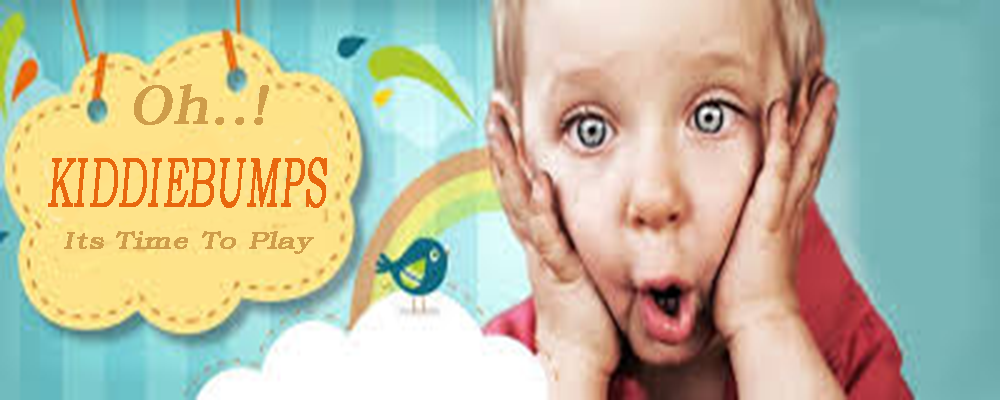
<style>
.page{position:relative;width:1000px;height:400px}
.page>*{position:absolute;margin:0}
.t1{font:54.4px "BookmanOldStyle";color:#ce9d4a;font-weight:bold;font-style:italic}
.t2{font:70.8px "BookmanOldStyle";color:#e8670e;font-weight:bold;font-style:italic;scale:0.5 1}
.t3{font:24.2px "BookmanOldStyle";color:#ce9d4a;font-weight:bold;font-style:italic;scale:1.22 1}
</style>
<div class="page">
<p class="t1" style="left:134px;top:84px;width:135px;height:41px">Oh..!</p>
<p class="t2" style="left:48px;top:157px;width:279px;height:51px">KIDDIEBUMPS</p>
<p class="t3" style="left:64px;top:231px;width:250px;height:23px">Its Time To Play</p>
</div>
